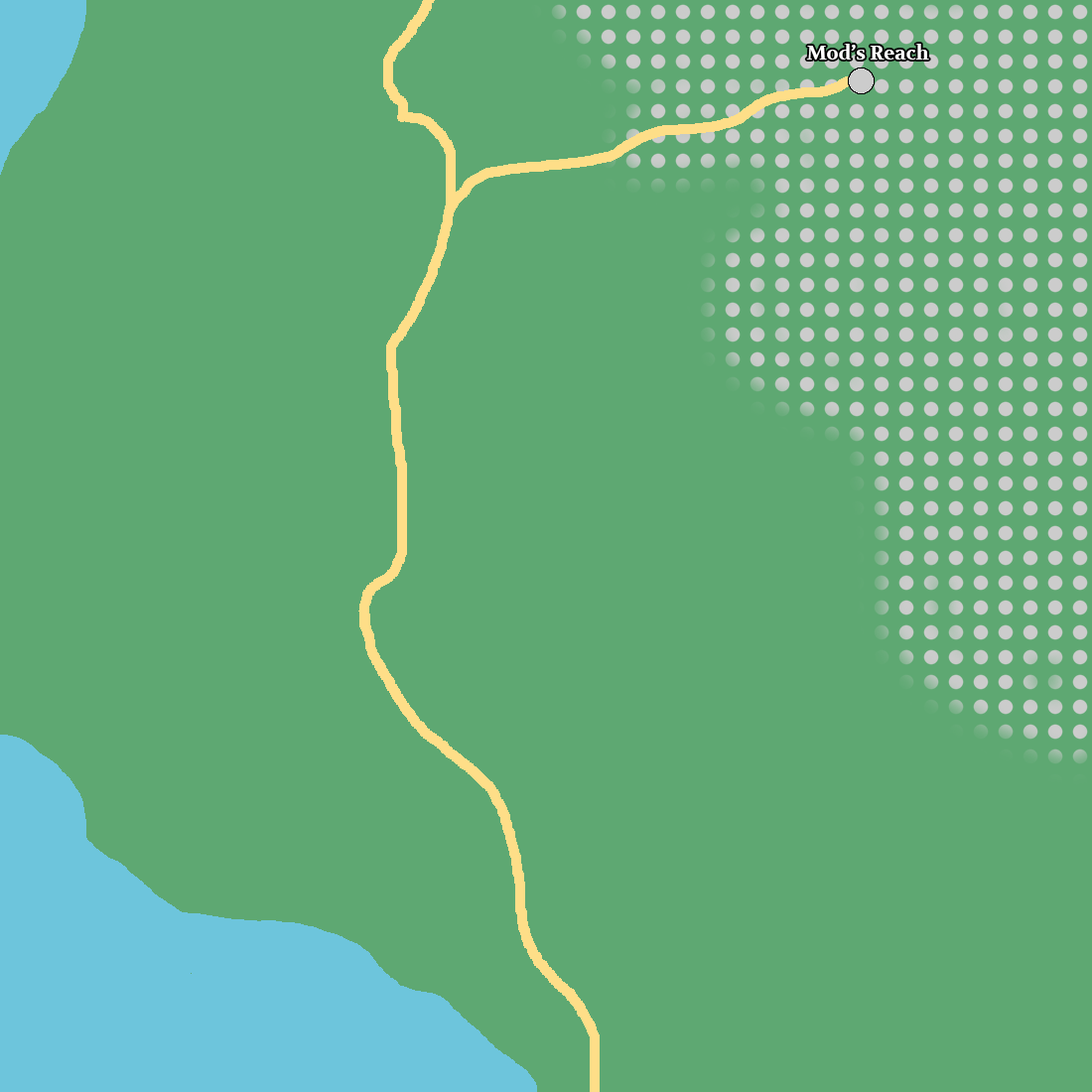
<style>
.page{position:relative;width:1092px;height:1092px;background:#5ea872}
.page>*{position:absolute;margin:0}
.t1{font:19.9px "Volkhov-Bold";color:#ffffff}
</style>
<div class="page">
<p class="t1" style="left:806px;top:44px;width:123px;height:16px">Mod’s Reach</p>
</div>
